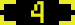
<style>
.page{position:relative;width:75px;height:25px;background:#000000}
.page>*{position:absolute;margin:0}
.t1{font:50px "Thintel";color:#eaec23}
</style>
<div class="page">
<p class="t1" style="left:31px;top:1px;width:13px;height:22px">4</p>
</div>
